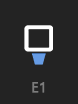
<style>
.page{position:relative;width:78px;height:104px;background:#232323}
.page>*{position:absolute;margin:0}
.t1{font:14px "SegoeUI";color:#7c7c7c;font-weight:bold}
</style>
<div class="page">
<p class="t1" style="left:32px;top:82px;width:13px;height:11px">E1</p>
</div>
